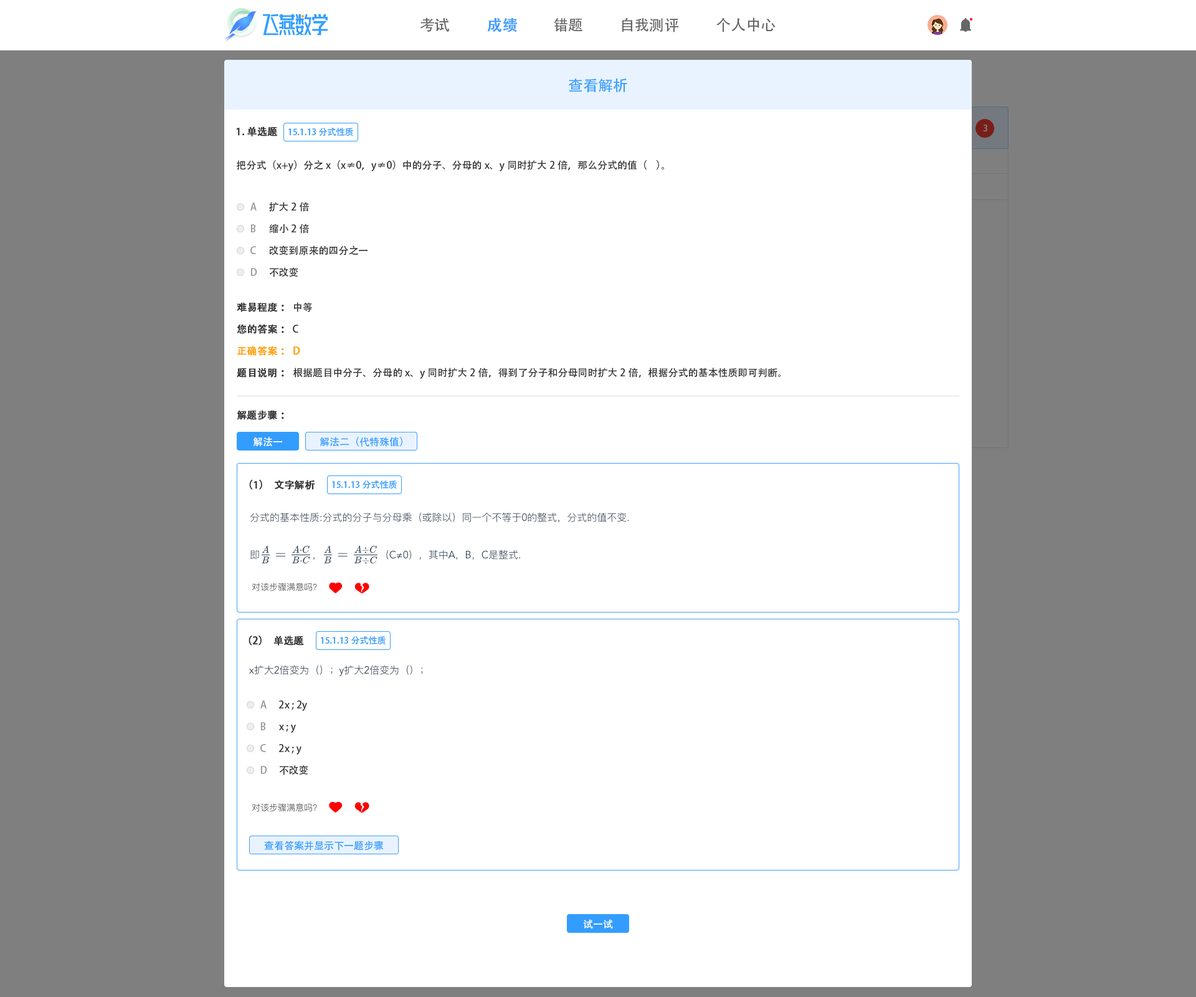
<style>
.page{position:relative;width:1196px;height:997px;background:#ffffff}
.page>*{position:absolute;margin:0}
.t1{font:15px "AdobeHeitiStd-Regular";color:#666666}
.t2{font:15px "AdobeHeitiStd-Regular";color:#409eff;font-weight:bold}
.t3{font:15px "AdobeHeitiStd-Regular";color:#339dff}
.t4{font:8.7px "AdobeHeitiStd-Regular";color:#7f7f7f}
.t5{font:10px "AdobeHeitiStd-Regular";color:#333333;font-weight:bold}
.t6{font:8.7px "AdobeHeitiStd-Regular";color:#339dff}
.t7{font:10px "AdobeHeitiStd-Regular";color:#333333}
.t8{font:10px "AdobeHeitiStd-Regular";color:#999999}
.t9{font:10px "AdobeHeitiStd-Regular";color:#fea300;font-weight:bold}
.t10{font:10px "AdobeHeitiStd-Regular";color:#ffffff}
.t11{font:10px "AdobeHeitiStd-Regular";color:#339dff}
</style>
<div class="page">
<p class="t1" style="left:420px;top:17px;width:30px;height:15px">考试</p>
<p class="t2" style="left:487px;top:17px;width:30px;height:15px">成绩</p>
<p class="t1" style="left:622px;top:17px;width:56px;height:15px">自我测评</p>
<p class="t1" style="left:716px;top:17px;width:60px;height:15px">个人中心</p>
<p class="t1" style="left:554px;top:18px;width:29px;height:14px">错题</p>
<p class="t3" style="left:569px;top:79px;width:58px;height:13px">查看解析</p>
<p class="t4" style="left:983px;top:125px;width:4px;height:6px">3</p>
<p class="t5" style="left:236px;top:126px;width:42px;height:10px">1.单选题</p>
<p class="t6" style="left:288px;top:128px;width:65px;height:8px">15.1.13分式性质</p>
<p class="t7" style="left:237px;top:160px;width:427px;height:11px">把分式（x+y）分之x（x≠0，y≠0）中的分子、分母的x、y同时扩大2倍，那么分式的值（    ）。</p>
<p class="t8" style="left:250px;top:202px;width:7px;height:9px">A</p>
<p class="t7" style="left:269px;top:202px;width:40px;height:10px">扩大2倍</p>
<p class="t8" style="left:250px;top:224px;width:6px;height:8px">B</p>
<p class="t7" style="left:269px;top:224px;width:40px;height:10px">缩小2倍</p>
<p class="t7" style="left:269px;top:245px;width:99px;height:10px">改变到原来的四分之一</p>
<p class="t8" style="left:250px;top:246px;width:6px;height:8px">C</p>
<p class="t8" style="left:250px;top:268px;width:7px;height:8px">D</p>
<p class="t7" style="left:269px;top:267px;width:29px;height:10px">不改变</p>
<p class="t5" style="left:237px;top:302px;width:75px;height:10px">难易程度：<span class="t7"> 中等</span></p>
<p class="t5" style="left:237px;top:324px;width:61px;height:10px">您的答案：<span class="t7"> C</span></p>
<p class="t9" style="left:237px;top:346px;width:63px;height:10px">正确答案： D</p>
<p class="t7" style="left:237px;top:368px;width:544px;height:11px"><span class="t5">题目说明： </span>根据题目中分子、分母的x、y同时扩大2倍，得到了分子和分母同时扩大2倍，根据分式的基本性质即可判断。</p>
<p class="t5" style="left:237px;top:410px;width:47px;height:10px">解题步骤：</p>
<p class="t10" style="left:253px;top:437px;width:29px;height:10px">解法一</p>
<p class="t11" style="left:320px;top:437px;width:82px;height:10px">解法二（代特殊值）</p>
<p class="t5" style="left:249px;top:480px;width:66px;height:10px">（1）文字解析</p>
<p class="t6" style="left:332px;top:480px;width:65px;height:9px">15.1.13分式性质</p>
<p class="t5" style="left:249px;top:635px;width:55px;height:10px">（2）单选题</p>
<p class="t6" style="left:321px;top:636px;width:65px;height:9px">15.1.13分式性质</p>
<p class="t8" style="left:260px;top:700px;width:7px;height:8px">A</p>
<p class="t7" style="left:278px;top:700px;width:29px;height:11px">2x ; 2y</p>
<p class="t8" style="left:260px;top:722px;width:6px;height:8px">B</p>
<p class="t7" style="left:279px;top:725px;width:17px;height:8px">x ; y</p>
<p class="t8" style="left:260px;top:744px;width:6px;height:8px">C</p>
<p class="t7" style="left:278px;top:744px;width:24px;height:10px">2x ; y</p>
<p class="t8" style="left:260px;top:766px;width:7px;height:8px">D</p>
<p class="t7" style="left:279px;top:765px;width:29px;height:10px">不改变</p>
<p class="t11" style="left:264px;top:840px;width:120px;height:10px">查看答案并显示下一题步骤</p>
<p class="t10" style="left:583px;top:919px;width:30px;height:10px">试一试</p>
</div>
